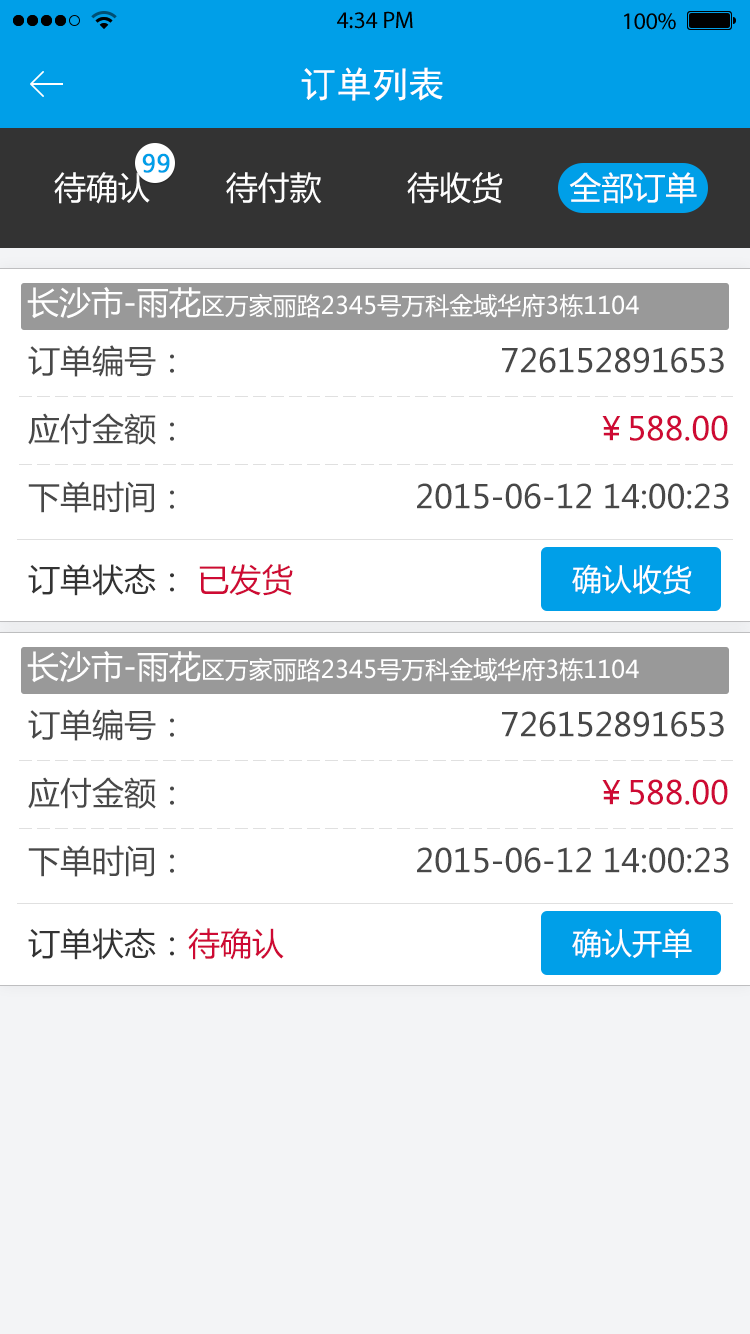
<style>
.page{position:relative;width:750px;height:1334px;background:#ffffff}
.page>*{position:absolute;margin:0}
.t1{font:36px "SimHei";color:#ffffff}
.t2{font:24px "MicrosoftYaHei";color:#009fe8;font-weight:bold}
.t3{font:32px "MicrosoftYaHei";color:#fefefe}
.t4{font:24px "MicrosoftYaHei";color:#ffffff}
.t5{font:32px "MicrosoftYaHei";color:#ffffff}
.t6{font:32px/68px "MicrosoftYaHei";color:#484848}
.t7{font:32px/68px "MicrosoftYaHei";color:#ce0a34}
.t8{font:32px "MicrosoftYaHei";color:#333333}
.t9{font:32px "MicrosoftYaHei";color:#ce0a34}
.t10{font:30px "MicrosoftYaHei";color:#ffffff}
</style>
<div class="page">
<p class="t1" style="left:301px;top:67px;width:142px;height:34px">订单列表</p>
<p class="t2" style="left:142px;top:153px;width:28px;height:20px">99</p>
<p class="t3" style="left:54px;top:172px;width:643px;height:32px">待确认        待付款         待收货       全部订单</p>
<p class="t4" style="left:27px;top:287px;width:612px;height:32px"><span class="t5">长沙市-雨花</span>区万家丽路2345号万科金域华府3栋1104</p>
<p class="t6" style="left:28px;top:345px;width:701px;height:168px">订单编号：                                 726152891653<br>应付金额：                                           <span class="t7">￥588.00<br></span>下单时间：                        2015-06-12 14:00:23</p>
<p class="t8" style="left:28px;top:564px;width:265px;height:32px">订单状态：<span class="t9"> 已发货</span></p>
<p class="t10" style="left:572px;top:564px;width:120px;height:31px">确认收货</p>
<p class="t4" style="left:27px;top:651px;width:612px;height:32px"><span class="t5">长沙市-雨花</span>区万家丽路2345号万科金域华府3栋1104</p>
<p class="t6" style="left:28px;top:709px;width:701px;height:168px">订单编号：                                 726152891653<br>应付金额：                                           <span class="t7">￥588.00<br></span>下单时间：                        2015-06-12 14:00:23</p>
<p class="t8" style="left:28px;top:928px;width:256px;height:32px">订单状态：<span class="t9">待确认</span></p>
<p class="t10" style="left:572px;top:928px;width:120px;height:30px">确认开单</p>
</div>
